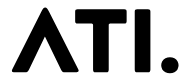
<style>
.page{position:relative;width:190px;height:80px;background:#ffffff}
.page>*{position:absolute;margin:0}
.t1{font:90px "Posterama2001W04-Bold";color:#000000}
</style>
<div class="page">
<p class="t1" style="left:11px;top:7px;width:168px;height:67px">ATI.</p>
</div>
